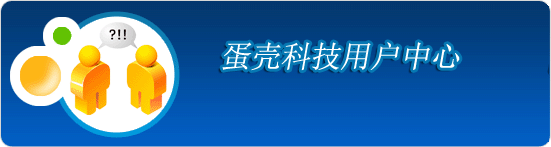
<style>
.page{position:relative;width:551px;height:147px}
.page>*{position:absolute;margin:0}
.t1{font:30px "NSimSun";color:#ffffff;font-style:italic}
</style>
<div class="page">
<p class="t1" style="left:222px;top:42px;width:238px;height:29px">蛋壳科技用户中心</p>
</div>
